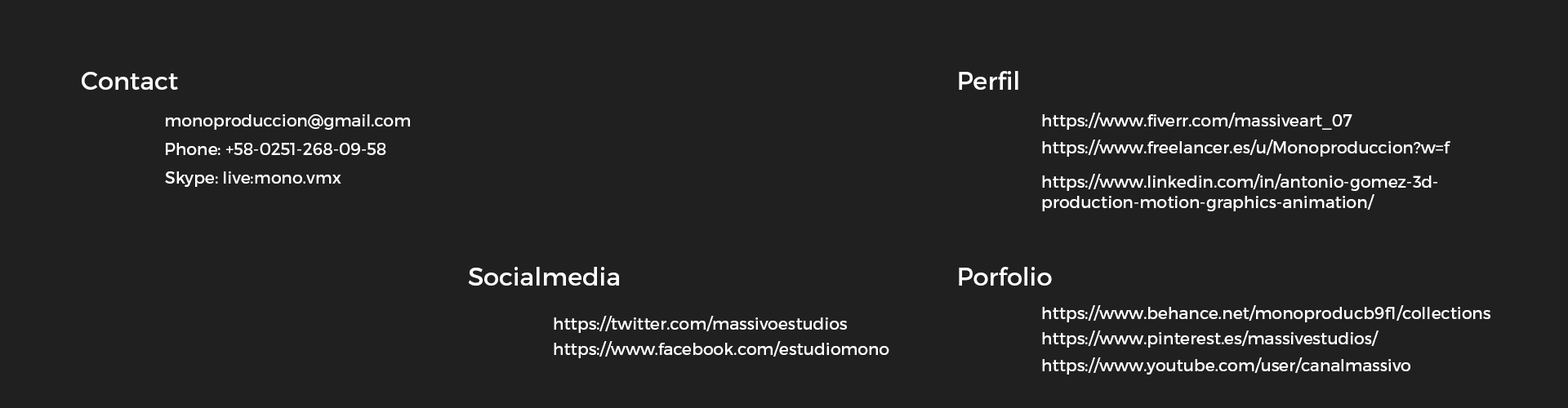
<style>
.page{position:relative;width:1568px;height:408px;background:#202020}
.page>*{position:absolute;margin:0}
.t1{font:24.8px "Montserrat-Regular";color:#ffffff}
.t2{font:16.6px "Montserrat-Regular";color:#ffffff}
.t3{font:16.6px/20.4px "Montserrat-Regular";color:#ffffff}
</style>
<div class="page">
<p class="t1" style="left:82px;top:72px;width:96px;height:18px">Contact</p>
<p class="t1" style="left:959px;top:71px;width:59px;height:19px">Perfil</p>
<p class="t2" style="left:1042px;top:113px;width:310px;height:17px">https://www.fiverr.com/massiveart_07</p>
<p class="t2" style="left:166px;top:114px;width:244px;height:16px">monoproduccion@gmail.com</p>
<p class="t2" style="left:166px;top:143px;width:220px;height:12px">Phone: +58-0251-268-09-58</p>
<p class="t2" style="left:1042px;top:140px;width:408px;height:17px">https://www.freelancer.es/u/Monoproduccion?w=f</p>
<p class="t2" style="left:165px;top:172px;width:176px;height:15px">Skype: live:mono.vmx</p>
<p class="t3" style="left:1042px;top:174px;width:395px;height:38px">https://www.linkedin.com/in/antonio-gomez-3d-<br>production-motion-graphics-animation/</p>
<p class="t1" style="left:468px;top:267px;width:151px;height:19px">Socialmedia</p>
<p class="t1" style="left:959px;top:267px;width:93px;height:19px">Porfolio</p>
<p class="t2" style="left:1042px;top:305px;width:448px;height:18px">https://www.behance.net/monoproducb9f1/collections</p>
<p class="t2" style="left:554px;top:316px;width:293px;height:17px">https://twitter.com/massivoestudios</p>
<p class="t2" style="left:554px;top:341px;width:335px;height:18px">https://www.facebook.com/estudiomono</p>
<p class="t2" style="left:1042px;top:331px;width:337px;height:17px">https://www.pinterest.es/massivestudios/</p>
<p class="t2" style="left:1042px;top:358px;width:368px;height:17px">https://www.youtube.com/user/canalmassivo</p>
</div>
